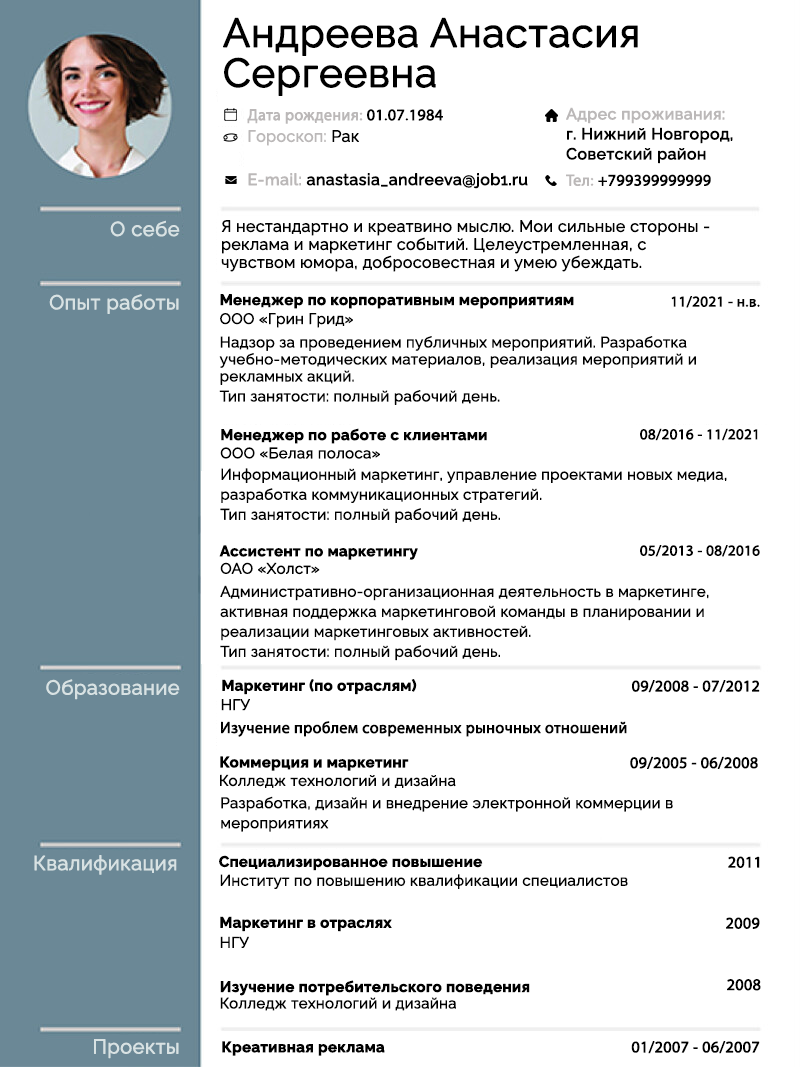
<style>
.page{position:relative;width:800px;height:1067px;background:#ffffff}
.page>*{position:absolute;margin:0}
.t1{font:40px/40px "Raleway-Regular";color:#000000;font-weight:bold}
.t2{font:16px "MyriadPro-Regular";color:#bbb8b8;font-weight:bold}
.t3{font:16px "MyriadPro-Regular";color:#000000;font-weight:bold}
.t4{font:16px/20px "Raleway-Medium";color:#000000;font-weight:bold}
.t5{font:16px/20px "Raleway-Medium";color:#bbb8b8;font-weight:bold}
.t6{font:16px "Raleway-Regular";color:#bbb8b8;font-weight:bold}
.t7{font:16px "Raleway-Regular";color:#000000;font-weight:bold}
.t8{font:16px "Raleway-Medium";color:#000000;font-weight:bold}
.t9{font:16px "Raleway-Medium";color:#bbb8b8;font-weight:bold}
.t10{font:20px "Raleway-Regular";color:#d8e2e3;font-weight:bold}
.t11{font:16px/18px "Raleway-Regular";color:#000000;font-weight:bold}
.t12{font:15px "Raleway-Bold";color:#000000;font-weight:bold}
.t13{font:15px "MyriadPro-Regular";color:#000000;font-weight:bold}
.t14{font:15px "Raleway-Regular";color:#000000;font-weight:bold}
.t15{font:15px/17px "Raleway-Regular";color:#000000;font-weight:bold}
.t16{font:15px/20px "Raleway-Regular";color:#000000;font-weight:bold}
</style>
<div class="page">
<p class="t1" style="left:223px;top:17px;width:415px;height:79px">Андреева Анастасия<br>Сергеевна</p>
<p class="t2" style="left:247px;top:109px;width:196px;height:15px">Дата рождения: <span class="t3">01.07.1984</span></p>
<p class="t4" style="left:566px;top:107px;width:167px;height:57px"><span class="t5">Адрес проживания: <br></span>г. Нижний Новгород,<br>Советский район</p>
<p class="t6" style="left:248px;top:130px;width:111px;height:16px">Гороскоп:<span class="t7"> Рак</span></p>
<p class="t8" style="left:248px;top:173px;width:280px;height:16px"><span class="t9">E-mail:</span> anastasia_andreeva@job1.ru</p>
<p class="t3" style="left:566px;top:174px;width:145px;height:12px"><span class="t2">Тел:</span> +799399999999</p>
<p class="t10" style="left:110px;top:220px;width:70px;height:17px">О себе</p>
<p class="t11" style="left:221px;top:220px;width:489px;height:52px">Я нестандартно и креатвино мыслю. Мои сильные стороны - реклама и маркетинг событий. Целеустремленная, с чувством юмора, добросовестная и умею убеждать.</p>
<p class="t10" style="left:49px;top:294px;width:130px;height:20px">Опыт работы</p>
<p class="t12" style="left:220px;top:294px;width:354px;height:15px">Менеджер по корпоративным мероприятиям</p>
<p class="t13" style="left:671px;top:296px;width:89px;height:12px">11/2021 - н.в.</p>
<p class="t14" style="left:220px;top:313px;width:133px;height:15px">ООО «Грин Грид»</p>
<p class="t15" style="left:219px;top:336px;width:477px;height:69px">Надзор за проведением публичных мероприятий. Разработка учебно-методических материалов, реализация мероприятий и рекламных акций.<br><span class="t16">Тип занятости: полный рабочий день.</span></p>
<p class="t12" style="left:221px;top:428px;width:266px;height:16px">Менеджер по работе с клиентами</p>
<p class="t13" style="left:640px;top:428px;width:118px;height:13px">08/2016 - 11/2021</p>
<p class="t14" style="left:220px;top:447px;width:160px;height:12px">ООО «Белая полоса»</p>
<p class="t16" style="left:220px;top:468px;width:507px;height:55px">Информационный маркетинг, управление проектами новых медиа, разработка коммуникационных стратегий.<br>Тип занятости: полный рабочий день.</p>
<p class="t12" style="left:219px;top:545px;width:199px;height:15px">Ассистент по маркетингу</p>
<p class="t13" style="left:640px;top:545px;width:120px;height:12px">05/2013 - 08/2016</p>
<p class="t14" style="left:220px;top:562px;width:100px;height:13px">ОАО «Холст»</p>
<p class="t16" style="left:220px;top:585px;width:489px;height:76px">Административно-организационная деятельность в маркетинге, активная поддержка маркетинговой команды в планировании и реализации маркетинговых активностей.<br>Тип занятости: полный рабочий день.</p>
<p class="t10" style="left:46px;top:679px;width:134px;height:21px">Образование</p>
<p class="t12" style="left:222px;top:679px;width:195px;height:16px">Маркетинг (по отраслям)</p>
<p class="t3" style="left:632px;top:680px;width:128px;height:13px">09/2008 - 07/2012</p>
<p class="t14" style="left:221px;top:699px;width:29px;height:12px">НГУ</p>
<p class="t3" style="left:221px;top:721px;width:406px;height:16px">Изучение проблем современных рыночных отношений</p>
<p class="t12" style="left:220px;top:756px;width:189px;height:15px">Коммерция и маркетинг</p>
<p class="t3" style="left:630px;top:756px;width:128px;height:13px">09/2005 - 06/2008</p>
<p class="t14" style="left:220px;top:774px;width:236px;height:14px">Колледж технологий и дизайна</p>
<p class="t16" style="left:221px;top:796px;width:452px;height:36px">Разработка, дизайн и внедрение электронной коммерции в мероприятиях</p>
<p class="t10" style="left:34px;top:855px;width:143px;height:20px">Квалификация</p>
<p class="t12" style="left:219px;top:855px;width:264px;height:16px">Специализированное повышение</p>
<p class="t3" style="left:728px;top:856px;width:32px;height:12px">2011</p>
<p class="t14" style="left:220px;top:874px;width:408px;height:15px">Институт по повышению квалификации специалистов</p>
<p class="t12" style="left:220px;top:916px;width:172px;height:16px">Маркетинг в отраслях</p>
<p class="t3" style="left:726px;top:917px;width:34px;height:12px">2009</p>
<p class="t14" style="left:220px;top:936px;width:29px;height:12px">НГУ</p>
<p class="t12" style="left:220px;top:980px;width:310px;height:16px">Изучение потребительского поведения</p>
<p class="t3" style="left:727px;top:979px;width:34px;height:12px">2008</p>
<p class="t14" style="left:220px;top:997px;width:236px;height:14px">Колледж технологий и дизайна</p>
<p class="t10" style="left:94px;top:1039px;width:85px;height:20px">Проекты</p>
<p class="t12" style="left:222px;top:1041px;width:163px;height:15px">Креативная реклама</p>
<p class="t3" style="left:631px;top:1041px;width:129px;height:13px">01/2007 - 06/2007</p>
</div>
